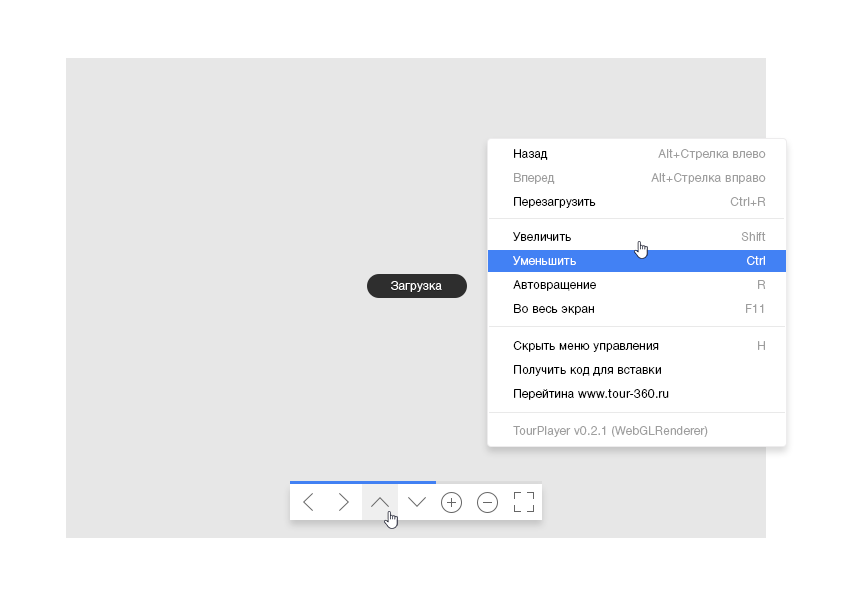
<style>
.page{position:relative;width:850px;height:600px;background:#ffffff}
.page>*{position:absolute;margin:0}
.t1{font:12px/24px "HelveticaNeueCyr-Light";letter-spacing:0.039em;color:#000000;scale:0.95 1}
.t2{font:12px/24px "HelveticaNeueCyr-Light";letter-spacing:0.039em;color:#9e9e9e;scale:0.95 1}
.t3{font:12px/24px "HelveticaNeueCyr-Light";letter-spacing:0.06em;color:#9e9e9e;scale:0.95 1}
.t4{font:12px/24px "HelveticaNeueCyr-Light";letter-spacing:0.05em;color:#000000;scale:0.95 1}
.t5{font:12px/24px "HelveticaNeueCyr-Light";letter-spacing:0.05em;color:#ffffff;scale:0.95 1}
.t6{font:12px/24px "HelveticaNeueCyr-Light";letter-spacing:0.05em;color:#9e9e9e;scale:0.95 1}
.t7{font:12px "HelveticaNeueCyr-Light";letter-spacing:0.05em;color:#ffffff;scale:0.95 1}
.t8{font:12px "HelveticaNeueCyr-Light";letter-spacing:0.05em;color:#9e9e9e;scale:0.95 1}
</style>
<div class="page">
<p class="t1" style="left:514px;top:149px;width:82px;height:59px">Назад<br><span class="t2">Вперед<br></span>Перезагрузить</p>
<p class="t3" style="left:651px;top:149px;width:115px;height:57px;text-align:right">Alt+Стрелка влево<br>Alt+Стрелка вправо<br>Ctrl+R</p>
<p class="t4" style="left:513px;top:232px;width:83px;height:83px">Увеличить<br><span class="t5">Уменьшить<br></span>Автовращение<br>Во весь экран</p>
<p class="t6" style="left:741px;top:232px;width:25px;height:81px;text-align:right">Shift <br><span class="t5">Ctrl<br></span>R<br>F11</p>
<p class="t7" style="left:391px;top:281px;width:51px;height:11px">Загрузка</p>
<p class="t4" style="left:513px;top:341px;width:156px;height:59px">Скрыть меню управления<br>Получить код для вставки<br>Перейтина www.tour-360.ru</p>
<p class="t8" style="left:758px;top:341px;width:7px;height:9px">H</p>
<p class="t8" style="left:513px;top:426px;width:195px;height:11px">TourPlayer v0.2.1 (WebGLRenderer)</p>
</div>
